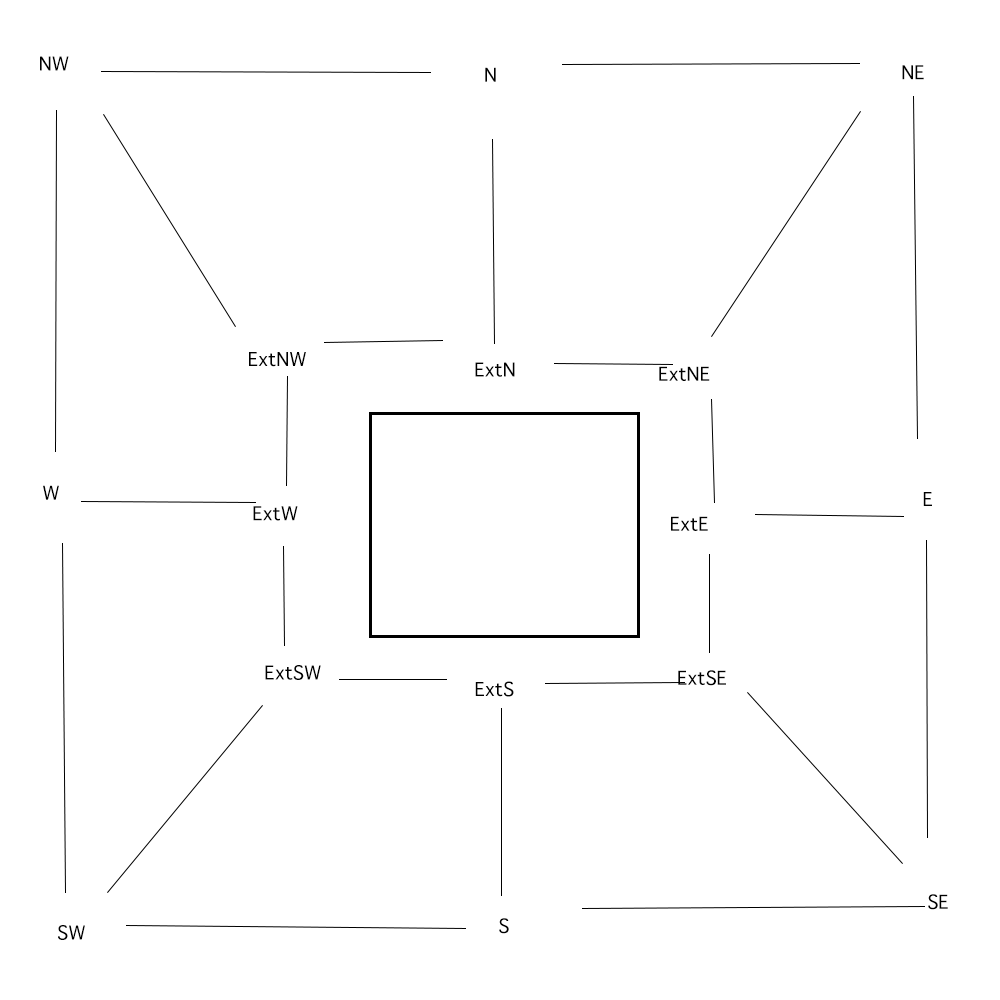
<style>
.page{position:relative;width:1000px;height:1000px;background:#ffffff}
.page>*{position:absolute;margin:0}
.t1{font:25.9px "AppleSymbols";color:#000000}
</style>
<div class="page">
<p class="t1" style="left:40px;top:56px;width:29px;height:15px">NW</p>
<p class="t1" style="left:902px;top:65px;width:22px;height:15px">NE</p>
<p class="t1" style="left:485px;top:67px;width:11px;height:15px">N</p>
<p class="t1" style="left:249px;top:352px;width:57px;height:15px">ExtNW</p>
<p class="t1" style="left:475px;top:362px;width:40px;height:15px">ExtN</p>
<p class="t1" style="left:659px;top:366px;width:51px;height:15px">ExtNE</p>
<p class="t1" style="left:43px;top:485px;width:16px;height:15px">W</p>
<p class="t1" style="left:923px;top:492px;width:9px;height:14px">E</p>
<p class="t1" style="left:253px;top:506px;width:45px;height:15px">ExtW</p>
<p class="t1" style="left:671px;top:516px;width:37px;height:15px">ExtE</p>
<p class="t1" style="left:265px;top:665px;width:56px;height:15px">ExtSW</p>
<p class="t1" style="left:678px;top:670px;width:48px;height:16px">ExtSE</p>
<p class="t1" style="left:475px;top:681px;width:39px;height:16px">ExtS</p>
<p class="t1" style="left:928px;top:894px;width:20px;height:16px">SE</p>
<p class="t1" style="left:499px;top:918px;width:10px;height:16px">S</p>
<p class="t1" style="left:58px;top:925px;width:27px;height:15px">SW</p>
</div>
